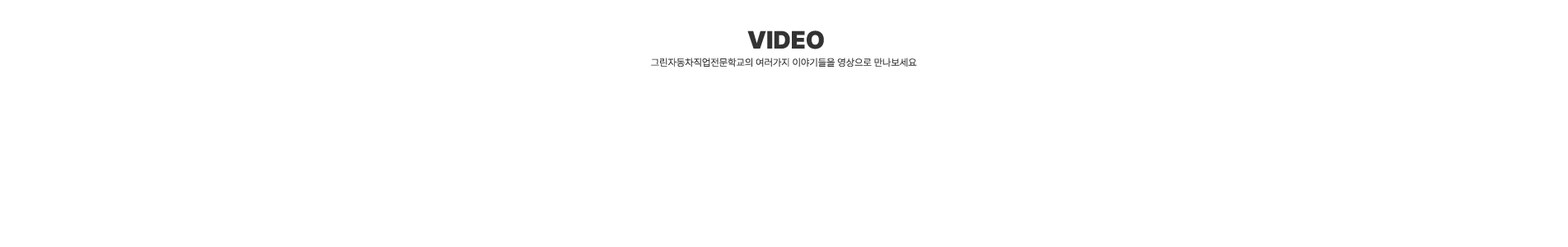
<style>
.page{position:relative;width:1568px;height:247px;background:#ffffff}
.page>*{position:absolute;margin:0}
.t1{font:24.7px "Pretendard-Black";color:#333333}
.t2{font:9.9px "Pretendard-Light";color:#333333}
</style>
<div class="page">
<p class="t1" style="left:747px;top:30px;width:77px;height:19px">VIDEO</p>
<p class="t2" style="left:651px;top:58px;width:266px;height:9px">그린자동차직업전문학교의 여러가지 이야기들을 영상으로 만나보세요</p>
</div>
